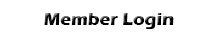
<style>
.page{position:relative;width:214px;height:38px;background:#ffffff}
.page>*{position:absolute;margin:0}
.t1{font:18px "ErasITC-Bold";color:#000000}
</style>
<div class="page">
<p class="t1" style="left:44px;top:13px;width:130px;height:16px">Member Login</p>
</div>
